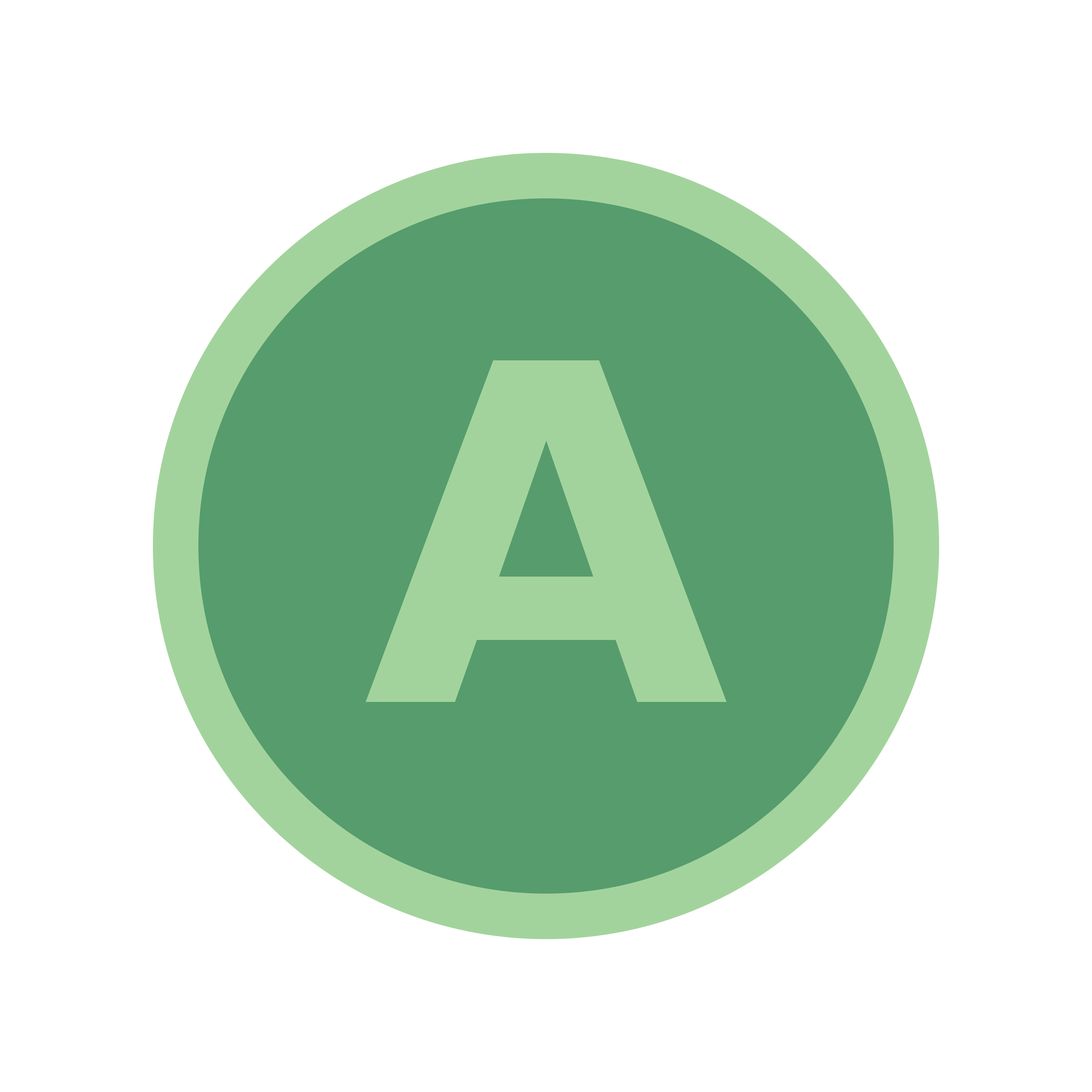
<style>
.page{position:relative;width:1092px;height:1092px;background:#ffffff}
.page>*{position:absolute;margin:0}
.t1{font:468.4px "DejaVuSans-Bold";color:#a3d39c}
</style>
<div class="page">
<p class="t1" style="left:366px;top:360px;width:361px;height:342px">A</p>
</div>
